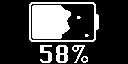
<style>
.page{position:relative;width:128px;height:64px;background:#000000}
.page>*{position:absolute;margin:0}
.t1{font:24px "ChicagoFLF";color:#ffffff}
</style>
<div class="page">
<p class="t1" style="left:40px;top:45px;width:48px;height:18px">58%</p>
</div>
